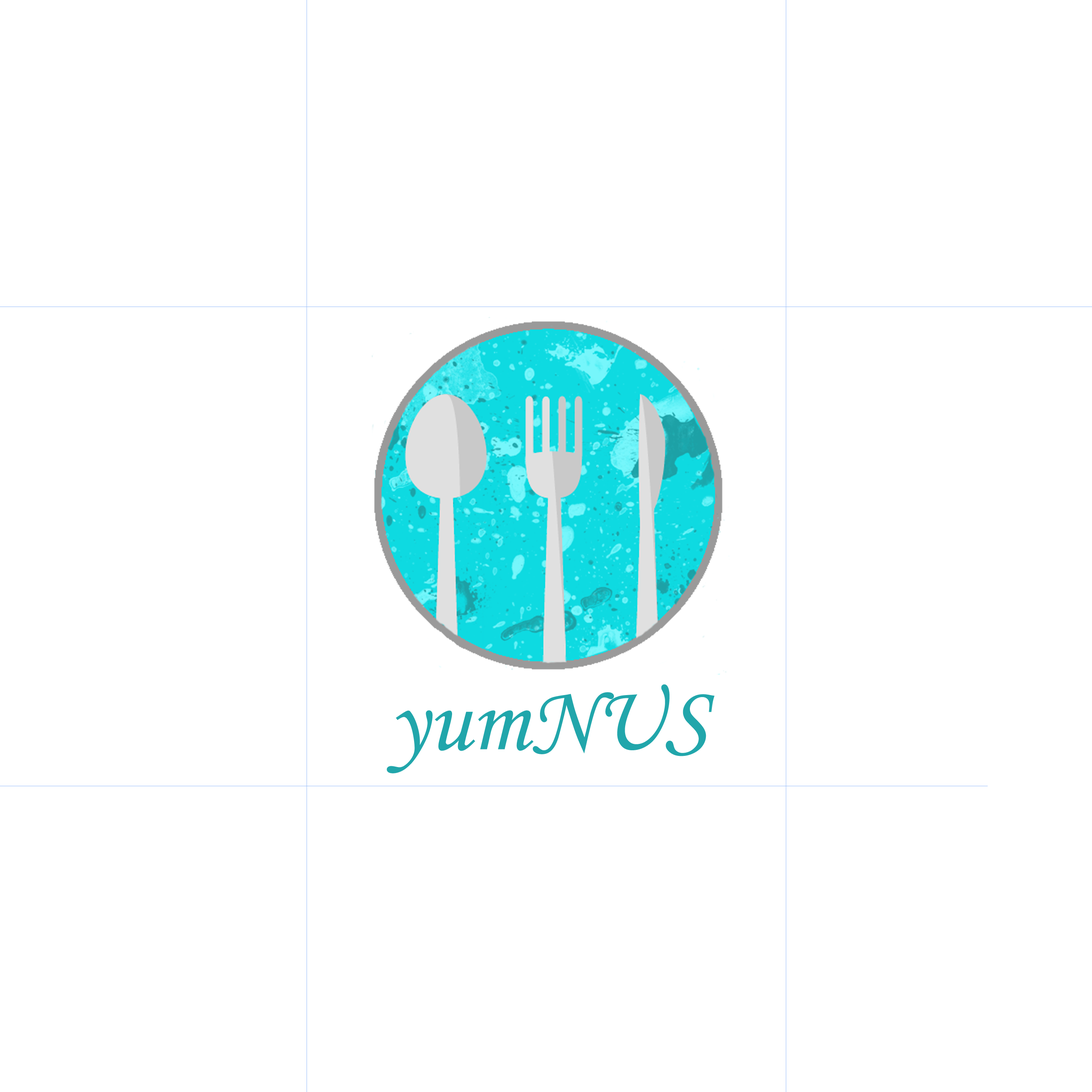
<style>
.page{position:relative;width:1092px;height:1092px;background:#ffffff}
.page>*{position:absolute;margin:0}
.t1{font:94px "MonotypeCorsiva";color:#21a6ab}
</style>
<div class="page">
<p class="t1" style="left:387px;top:684px;width:328px;height:89px">yumNUS</p>
</div>
